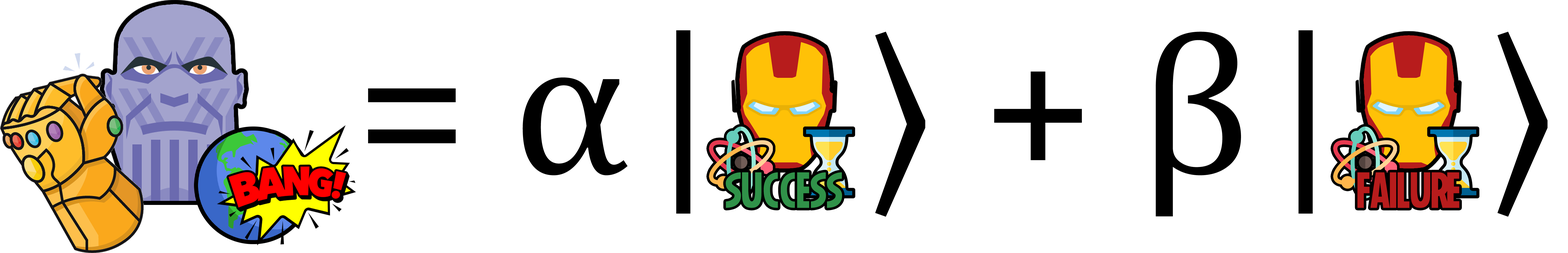
<style>
.page{position:relative;width:1568px;height:253px;background:#ffffff}
.page>*{position:absolute;margin:0}
.t1{font:202.3px "Cambria";color:#000000}
.t2{font:202.3px "SitkaSmall-Italic";color:#000000}
.t3{font:50.6px "Marvel-Regular";color:#309249}
.t4{font:50.6px "Marvel-Regular";color:#b71c1c}
</style>
<div class="page">
<p class="t1" style="left:368px;top:30px;width:1180px;height:187px">= α<span class="t2">|</span>   ⟩ + β<span class="t2">|</span>   ⟩</p>
<p class="t3" style="left:726px;top:172px;width:116px;height:36px">SUCCESS</p>
<p class="t4" style="left:1357px;top:172px;width:103px;height:36px">FAILURE</p>
</div>
